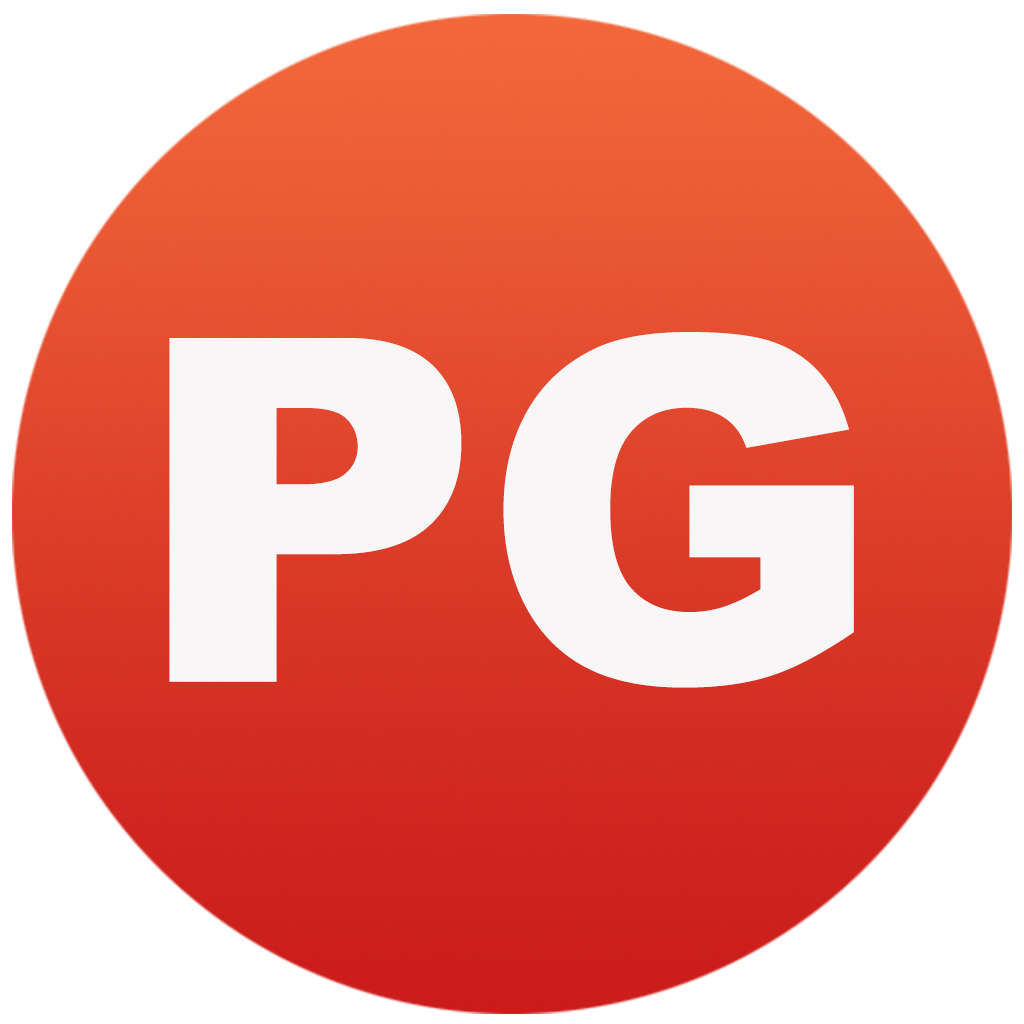
<style>
.page{position:relative;width:1024px;height:1024px;background:#ffffff}
.page>*{position:absolute;margin:0}
.t1{font:480px "Arial-Black";color:#f8f6f6}
</style>
<div class="page">
<p class="t1" style="left:169px;top:332px;width:685px;height:356px">PG</p>
</div>
